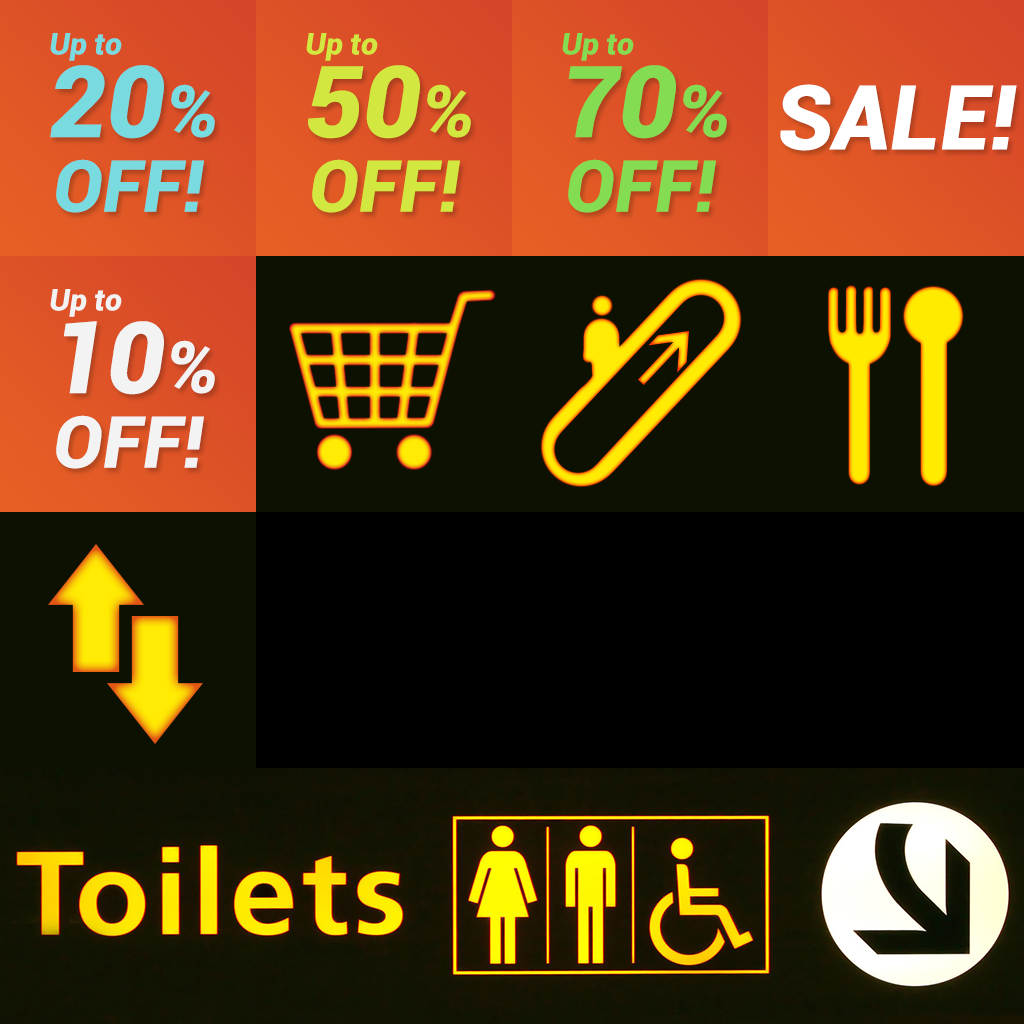
<style>
.page{position:relative;width:1024px;height:1024px}
.page>*{position:absolute;margin:0}
.t1{font:30px "Roboto-BlackItalic";color:#79dbdf}
.t2{font:30px "Roboto-BlackItalic";color:#d2e841}
.t3{font:30px "Roboto-BlackItalic";color:#83dc52}
.t4{font:100px "Roboto-BlackItalic";color:#79dbdf}
.t5{font:100px "Roboto-BlackItalic";color:#d2e841}
.t6{font:100px "Roboto-BlackItalic";color:#83dc52}
.t7{font:72px "Roboto-BlackItalic";color:#78dde1}
.t8{font:72px "Roboto-BlackItalic";color:#d2e841}
.t9{font:72px "Roboto-BlackItalic";color:#83dc52}
.t10{font:90px "Roboto-BlackItalic";color:#ffffff}
.t11{font:72px "Roboto-BlackItalic";color:#79dbdf}
.t12{font:30px "Roboto-BlackItalic";color:#f3f3f3}
.t13{font:100px "Roboto-BlackItalic";color:#f3f3f3}
.t14{font:72px "Roboto-BlackItalic";color:#f3f3f3}
</style>
<div class="page">
<p class="t1" style="left:50px;top:33px;width:72px;height:28px">Up to</p>
<p class="t2" style="left:306px;top:33px;width:72px;height:28px">Up to</p>
<p class="t3" style="left:562px;top:33px;width:72px;height:28px">Up to</p>
<p class="t4" style="left:50px;top:65px;width:114px;height:74px">20</p>
<p class="t5" style="left:308px;top:65px;width:112px;height:74px">50</p>
<p class="t6" style="left:568px;top:65px;width:108px;height:74px">70</p>
<p class="t7" style="left:171px;top:84px;width:44px;height:54px">%</p>
<p class="t8" style="left:427px;top:84px;width:44px;height:54px">%</p>
<p class="t9" style="left:683px;top:84px;width:44px;height:54px">%</p>
<p class="t10" style="left:780px;top:84px;width:237px;height:67px">SALE!</p>
<p class="t11" style="left:56px;top:159px;width:148px;height:54px">OFF!</p>
<p class="t8" style="left:312px;top:159px;width:148px;height:54px">OFF!</p>
<p class="t9" style="left:568px;top:159px;width:148px;height:54px">OFF!</p>
<p class="t12" style="left:50px;top:289px;width:72px;height:28px">Up to</p>
<p class="t13" style="left:63px;top:321px;width:101px;height:74px">10</p>
<p class="t14" style="left:171px;top:340px;width:44px;height:54px">%</p>
<p class="t14" style="left:56px;top:415px;width:148px;height:54px">OFF!</p>
</div>
